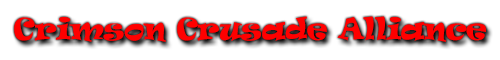
<style>
.page{position:relative;width:500px;height:60px;background:#ffffff}
.page>*{position:absolute;margin:0}
.t1{font:28px "Ravie";color:#ff0000}
</style>
<div class="page">
<p class="t1" style="left:14px;top:16px;width:472px;height:26px">Crimson Crusade Alliance</p>
</div>
